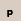
<style>
.page{position:relative;width:21px;height:21px;background:#d9cdc1}
.page>*{position:absolute;margin:0}
.t1{font:9px "Tahoma-Bold";color:#000000}
</style>
<div class="page">
<p class="t1" style="left:7px;top:10px;width:6px;height:7px">p</p>
</div>
